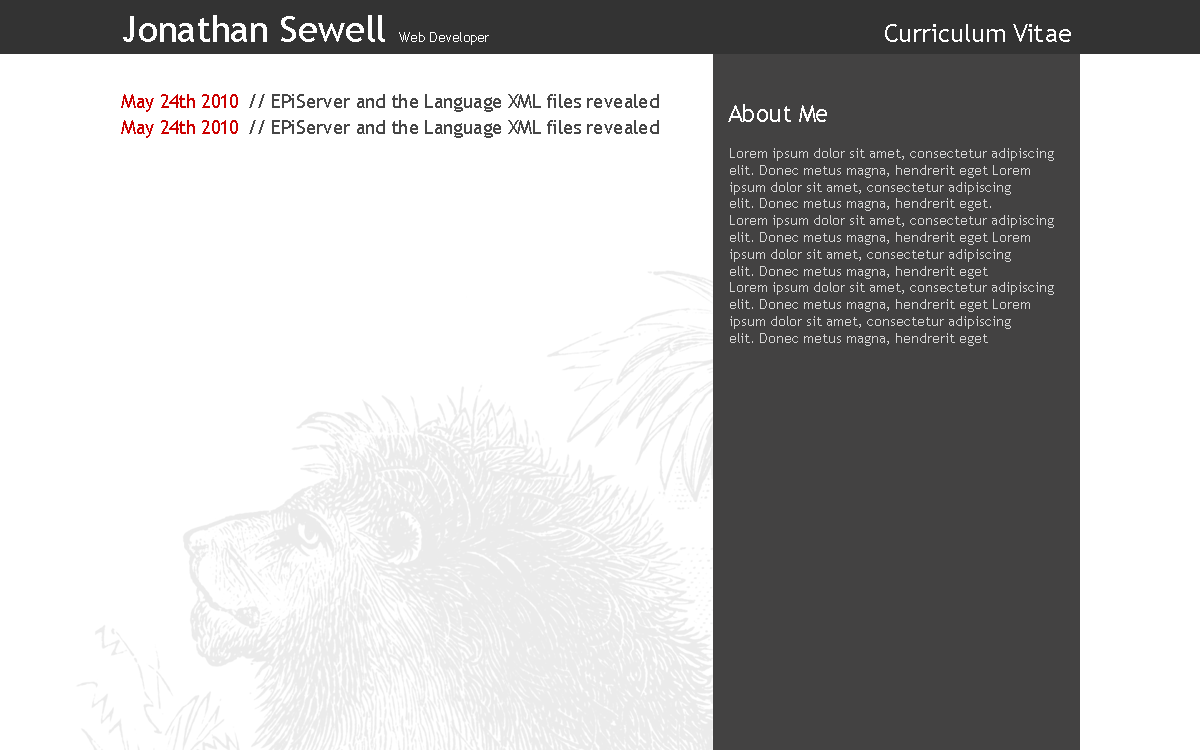
<style>
.page{position:relative;width:1200px;height:750px;background:#ffffff}
.page>*{position:absolute;margin:0}
.t1{font:36px "TrebuchetMS";color:#ffffff}
.t2{font:25px "TrebuchetMS";color:#fefefe}
.t3{font:14px "TrebuchetMS";color:#ffffff}
.t4{font:18.8px "TrebuchetMS";color:#cc0000}
.t5{font:18.8px "TrebuchetMS";color:#464646}
.t6{font:24px "TrebuchetMS";color:#ffffff}
.t7{font:14px "TrebuchetMS";color:#d5d5d5}
</style>
<div class="page">
<p class="t1" style="left:123px;top:15px;width:262px;height:27px">Jonathan Sewell</p>
<p class="t2" style="left:885px;top:24px;width:186px;height:18px">Curriculum Vitae</p>
<p class="t3" style="left:399px;top:32px;width:90px;height:13px">Web Developer</p>
<p class="t4" style="left:121px;top:94px;width:117px;height:18px">May 24th 2010</p>
<p class="t5" style="left:249px;top:94px;width:410px;height:18px">// EPiServer and the Language XML files revealed</p>
<p class="t6" style="left:728px;top:104px;width:99px;height:18px">About Me</p>
<p class="t4" style="left:121px;top:120px;width:117px;height:18px">May 24th 2010</p>
<p class="t5" style="left:249px;top:120px;width:410px;height:18px">// EPiServer and the Language XML files revealed</p>
<p class="t7" style="left:730px;top:148px;width:324px;height:198px">Lorem ipsum dolor sit amet, consectetur adipiscing <br>elit. Donec metus magna, hendrerit eget Lorem <br>ipsum dolor sit amet, consectetur adipiscing <br>elit. Donec metus magna, hendrerit eget. <br>Lorem ipsum dolor sit amet, consectetur adipiscing <br>elit. Donec metus magna, hendrerit eget Lorem <br>ipsum dolor sit amet, consectetur adipiscing <br>elit. Donec metus magna, hendrerit eget<br>Lorem ipsum dolor sit amet, consectetur adipiscing <br>elit. Donec metus magna, hendrerit eget Lorem <br>ipsum dolor sit amet, consectetur adipiscing <br>elit. Donec metus magna, hendrerit eget</p>
</div>
